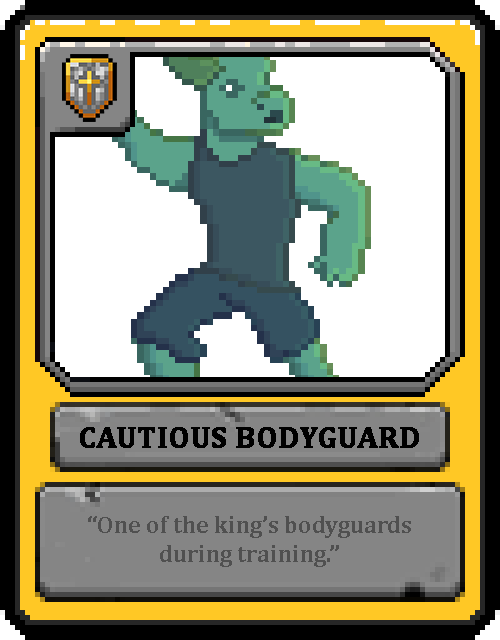
<style>
.page{position:relative;width:500px;height:640px;background:#ffffff}
.page>*{position:absolute;margin:0}
.t1{font:30px "Cambria-Bold";color:#000000;text-transform:uppercase;font-weight:bold}
.t2{font:24px "Cambria-Bold";color:#505050}
</style>
<div class="page">
<p class="t1" style="left:80px;top:427px;width:339px;height:21px">Cautious Bodyguard</p>
<p class="t2" style="left:88px;top:516px;width:323px;height:51px;text-align:center">“One of the king’s bodyguards during training.”</p>
</div>
